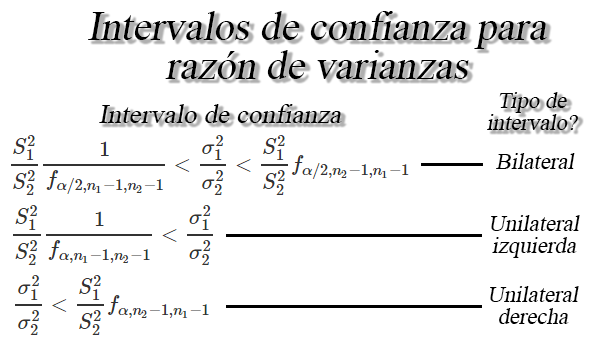
<style>
.page{position:relative;width:616px;height:342px;background:#ffffff}
.page>*{position:absolute;margin:0}
.t1{font:30.5px/38.9px "TimesNewRomanPSMT";color:#000000;font-style:italic}
.t2{font:17px/21.7px "TimesNewRomanPSMT";color:#000000;font-style:italic}
.t3{font:20.4px "TimesNewRomanPSMT";color:#000000;font-style:italic}
.t4{font:17px "TimesNewRomanPSMT";color:#000000;font-style:italic}
</style>
<div class="page">
<p class="t1" style="left:88px;top:11px;width:459px;height:68px;text-align:center">Intervalos de confianza para<br>razón de varianzas</p>
<p class="t2" style="left:487px;top:92px;width:91px;height:38px;text-align:center">Tipo de<br>intervalo?</p>
<p class="t3" style="left:99px;top:104px;width:243px;height:19px">Intervalo de confianza</p>
<p class="t4" style="left:496px;top:153px;width:79px;height:16px">Bilateral</p>
<p class="t2" style="left:491px;top:215px;width:89px;height:43px;text-align:center">Unilateral<br>izquierda</p>
<p class="t2" style="left:490px;top:286px;width:89px;height:38px;text-align:center">Unilateral<br>derecha</p>
</div>
